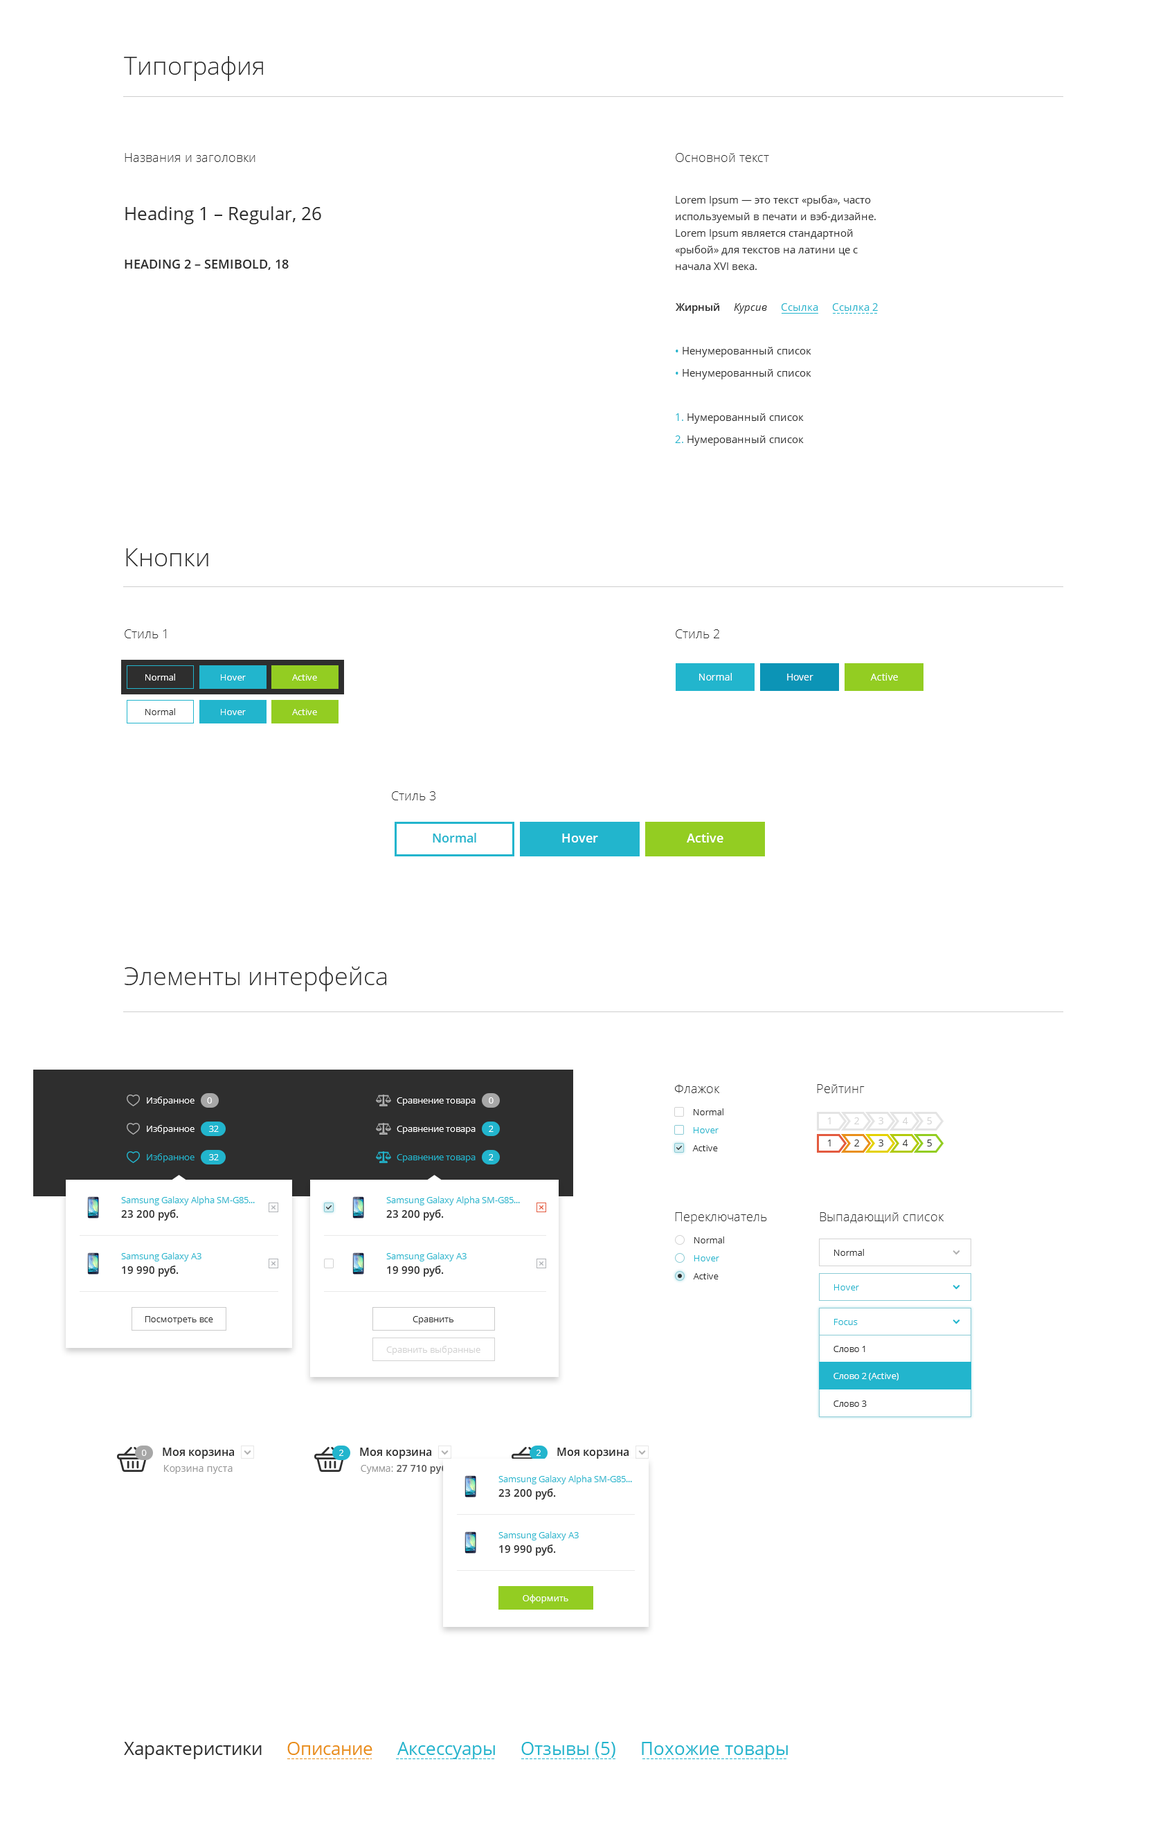
<style>
.page{position:relative;width:1163px;height:1836px;background:#ffffff}
.page>*{position:absolute;margin:0}
.t1{font:24.9px "OpenSans-Light";color:#2e2e2e}
.t2{font:12.5px "OpenSans-Light";color:#2e2e2e}
.t3{font:10.4px/16.6px "OpenSans";color:#2e2e2e}
.t4{font:18px "OpenSans";color:#2e2e2e}
.t5{font:12.5px "OpenSans-Semibold";color:#2e2e2e;text-transform:uppercase}
.t6{font:10.4px "OpenSans";color:#22b5cd}
.t7{font:10.4px "OpenSans-Semibold";color:#2e2e2e}
.t8{font:10.4px "OpenSans-Italic";color:#2e2e2e}
.t9{font:10.4px/16.6px "OpenSans";color:#22b5cd}
.t10{font:9px "OpenSans";color:#ffffff}
.t11{font:9.7px "OpenSans";color:#ffffff}
.t12{font:9px "OpenSans";color:#2e2e2e}
.t13{font:12.5px "OpenSans-Semibold";color:#22b5cd}
.t14{font:12.5px "OpenSans-Semibold";color:#ffffff}
.t15{font:9px "OpenSans";color:#feffff}
.t16{font:9.7px "OpenSans";color:#d2d2d2}
.t17{font:9px "OpenSans";color:#22b5cd}
.t18{font:9.7px "OpenSans";color:#2e2e2e}
.t19{font:9px/8.3px "OpenSans";color:#22b5cd}
.t20{font:10.4px/14.5px "OpenSans-Semibold";color:#2e2e2e}
.t21{font:9px/16.6px "OpenSans";color:#22b5cd}
.t22{font:9px "OpenSans";color:#d2d2d2}
.t23{font:9px "OpenSans";color:#fefefe}
.t24{font:11.1px "OpenSans-Semibold";color:#2e2e2e}
.t25{font:9.7px "OpenSans";color:#959595}
.t26{font:9.7px "OpenSans-Semibold";color:#555555}
.t27{font:18px "OpenSans";color:#22b5cd}
.t28{font:18px "OpenSans";color:#e98f1a}
</style>
<div class="page">
<p class="t1" style="left:124px;top:56px;width:139px;height:25px">Типография</p>
<p class="t2" style="left:125px;top:153px;width:130px;height:9px">Названия и заголовки</p>
<p class="t2" style="left:676px;top:153px;width:93px;height:9px">Основной текст</p>
<p class="t3" style="left:675px;top:195px;width:201px;height:75px">Lorem Ipsum — это текст «рыба», часто используемый в печати и вэб-дизайне. Lorem Ipsum является стандартной «рыбой» для текстов на латини це с начала XVI века.</p>
<p class="t4" style="left:125px;top:206px;width:196px;height:18px">Heading 1 – Regular, 26</p>
<p class="t5" style="left:125px;top:260px;width:164px;height:10px">Heading 2 – Semibold, 18</p>
<p class="t6" style="left:676px;top:303px;width:202px;height:11px"><span class="t7">Жирный     </span><span class="t8">Курсив     </span>Ссылка     Ссылка 2</p>
<p class="t3" style="left:675px;top:347px;width:136px;height:99px"><span class="t9">•</span> Ненумерованный список<br><span class="t9">•</span> Ненумерованный список<br><br><span class="t9">1.</span> Нумерованный список<br><span class="t9">2.</span> Нумерованный список</p>
<p class="t1" style="left:126px;top:548px;width:82px;height:18px">Кнопки</p>
<p class="t2" style="left:125px;top:629px;width:41px;height:9px">Cтиль 1</p>
<p class="t2" style="left:676px;top:629px;width:43px;height:9px">Cтиль 2</p>
<p class="t10" style="left:145px;top:674px;width:30px;height:7px">Normal</p>
<p class="t10" style="left:221px;top:674px;width:25px;height:7px">Hover</p>
<p class="t10" style="left:292px;top:674px;width:25px;height:7px">Active</p>
<p class="t11" style="left:699px;top:673px;width:33px;height:8px">Normal</p>
<p class="t11" style="left:787px;top:674px;width:26px;height:7px">Hover</p>
<p class="t11" style="left:870px;top:673px;width:28px;height:8px">Active</p>
<p class="t12" style="left:145px;top:708px;width:30px;height:7px">Normal</p>
<p class="t10" style="left:221px;top:709px;width:25px;height:6px">Hover</p>
<p class="t10" style="left:292px;top:709px;width:25px;height:6px">Active</p>
<p class="t2" style="left:392px;top:791px;width:43px;height:9px">Cтиль 3</p>
<p class="t13" style="left:433px;top:833px;width:43px;height:10px">Normal</p>
<p class="t14" style="left:562px;top:834px;width:36px;height:9px">Hover</p>
<p class="t14" style="left:687px;top:833px;width:36px;height:10px">Active</p>
<p class="t1" style="left:125px;top:966px;width:261px;height:25px">Элементы интерфейса</p>
<p class="t2" style="left:675px;top:1084px;width:44px;height:9px">Флажок</p>
<p class="t2" style="left:817px;top:1084px;width:48px;height:9px">Рейтинг</p>
<p class="t10" style="left:147px;top:1097px;width:48px;height:9px">Избранное</p>
<p class="t10" style="left:207px;top:1097px;width:5px;height:7px">0</p>
<p class="t10" style="left:397px;top:1097px;width:79px;height:9px">Сравнение товара</p>
<p class="t15" style="left:489px;top:1097px;width:5px;height:7px">0</p>
<p class="t12" style="left:694px;top:1108px;width:29px;height:7px">Normal</p>
<p class="t16" style="left:828px;top:1117px;width:3px;height:7px">1</p>
<p class="t16" style="left:854px;top:1117px;width:5px;height:7px">2</p>
<p class="t16" style="left:879px;top:1117px;width:4px;height:7px">3</p>
<p class="t16" style="left:903px;top:1117px;width:5px;height:7px">4</p>
<p class="t16" style="left:927px;top:1117px;width:5px;height:7px">5</p>
<p class="t10" style="left:147px;top:1125px;width:48px;height:9px">Избранное</p>
<p class="t10" style="left:209px;top:1126px;width:10px;height:6px">32</p>
<p class="t10" style="left:397px;top:1126px;width:79px;height:8px">Сравнение товара</p>
<p class="t15" style="left:489px;top:1126px;width:5px;height:6px">2</p>
<p class="t17" style="left:694px;top:1127px;width:25px;height:6px">Hover</p>
<p class="t12" style="left:692px;top:1145px;width:26px;height:6px">Active</p>
<p class="t18" style="left:828px;top:1140px;width:3px;height:6px">1</p>
<p class="t18" style="left:854px;top:1140px;width:5px;height:6px">2</p>
<p class="t18" style="left:879px;top:1140px;width:4px;height:6px">3</p>
<p class="t18" style="left:903px;top:1140px;width:5px;height:6px">4</p>
<p class="t18" style="left:927px;top:1140px;width:5px;height:6px">5</p>
<p class="t17" style="left:147px;top:1153px;width:48px;height:9px">Избранное</p>
<p class="t10" style="left:209px;top:1154px;width:10px;height:6px">32</p>
<p class="t17" style="left:397px;top:1154px;width:79px;height:8px">Сравнение товара</p>
<p class="t15" style="left:489px;top:1154px;width:5px;height:6px">2</p>
<p class="t19" style="left:121px;top:1196px;width:134px;height:25px">Samsung Galaxy Alpha SM-G85...<br><span class="t20">23 200 руб.</span></p>
<p class="t19" style="left:386px;top:1196px;width:134px;height:25px">Samsung Galaxy Alpha SM-G85...<br><span class="t20">23 200 руб.</span></p>
<p class="t2" style="left:675px;top:1212px;width:92px;height:12px">Переключатель</p>
<p class="t2" style="left:820px;top:1212px;width:124px;height:11px">Выпадающий список</p>
<p class="t12" style="left:694px;top:1236px;width:30px;height:7px">Normal</p>
<p class="t21" style="left:121px;top:1252px;width:80px;height:25px">Samsung Galaxy A3<br><span class="t20">19 990 руб.</span></p>
<p class="t21" style="left:386px;top:1252px;width:81px;height:25px">Samsung Galaxy A3<br><span class="t20">19 990 руб.</span></p>
<p class="t12" style="left:834px;top:1249px;width:30px;height:7px">Normal</p>
<p class="t17" style="left:694px;top:1255px;width:25px;height:6px">Hover</p>
<p class="t12" style="left:693px;top:1273px;width:26px;height:6px">Active</p>
<p class="t17" style="left:834px;top:1284px;width:25px;height:6px">Hover</p>
<p class="t12" style="left:145px;top:1316px;width:68px;height:8px">Посмотреть все</p>
<p class="t12" style="left:413px;top:1316px;width:40px;height:8px">Сравнить</p>
<p class="t17" style="left:834px;top:1319px;width:24px;height:6px">Focus</p>
<p class="t22" style="left:386px;top:1346px;width:94px;height:9px">Сравнить выбранные</p>
<p class="t12" style="left:834px;top:1346px;width:31px;height:6px">Слово 1</p>
<p class="t23" style="left:834px;top:1373px;width:65px;height:7px">Слово 2 (Active)</p>
<p class="t12" style="left:834px;top:1401px;width:33px;height:6px">Слово 3</p>
<p class="t10" style="left:142px;top:1450px;width:5px;height:6px">0</p>
<p class="t24" style="left:163px;top:1448px;width:71px;height:11px">Моя корзина</p>
<p class="t10" style="left:339px;top:1450px;width:4px;height:6px">2</p>
<p class="t24" style="left:360px;top:1448px;width:71px;height:11px">Моя корзина</p>
<p class="t10" style="left:537px;top:1450px;width:4px;height:6px">2</p>
<p class="t24" style="left:557px;top:1448px;width:72px;height:11px">Моя корзина</p>
<p class="t25" style="left:164px;top:1465px;width:69px;height:9px">Корзина пуста</p>
<p class="t26" style="left:361px;top:1464px;width:89px;height:10px"><span class="t25">Сумма: </span>27 710 руб.</p>
<p class="t19" style="left:498px;top:1475px;width:134px;height:25px">Samsung Galaxy Alpha SM-G85...<br><span class="t20">23 200 руб.</span></p>
<p class="t21" style="left:498px;top:1531px;width:81px;height:25px">Samsung Galaxy A3<br><span class="t20">19 990 руб.</span></p>
<p class="t10" style="left:523px;top:1594px;width:45px;height:9px">Оформить</p>
<p class="t27" style="left:124px;top:1742px;width:664px;height:17px"><span class="t4">Характеристики     </span><span class="t28">Описание</span>     Аксессуары     Отзывы (5)     Похожие товары</p>
</div>
